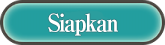
<style>
.page{position:relative;width:165px;height:45px}
.page>*{position:absolute;margin:0}
.t1{font:24px "RyuminPro-ExBold";letter-spacing:-0.08em;color:#ffffff;scale:0.9 1}
</style>
<div class="page">
<p class="t1" style="left:48px;top:13px;width:70px;height:23px">Siapkan</p>
</div>
